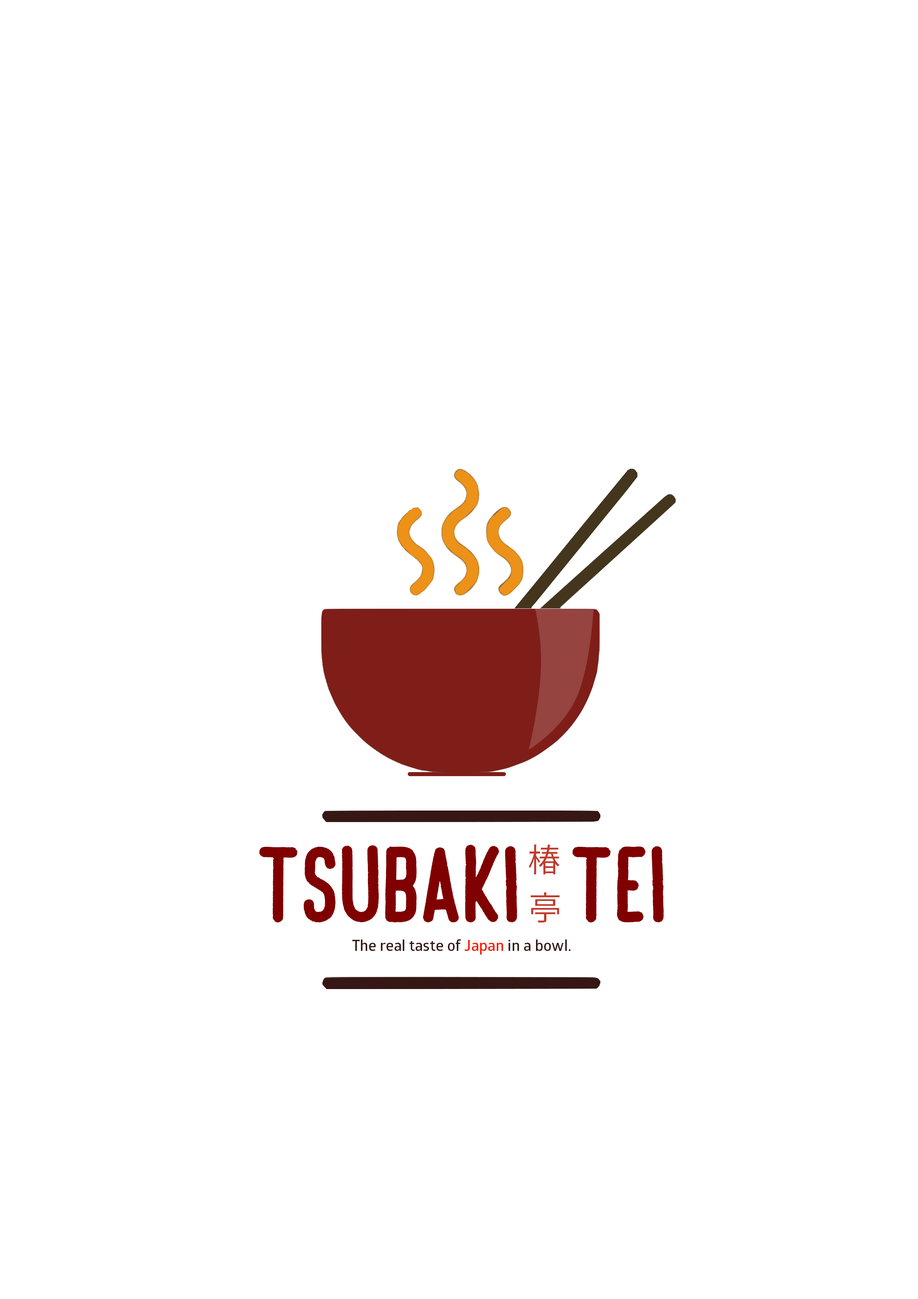
<style>
.page{position:relative;width:918px;height:1299px;background:#ffffff}
.page>*{position:absolute;margin:0}
.t1{font:84.8px "CafeFrancoise";color:#800000}
.t2{font:32.4px "KozGoPr6N-Regular";color:#c13a2b}
.t3{font:15.4px "GloberSemiBoldFree";color:#361714}
.t4{font:15.4px "GloberSemiBoldFree";color:#ff1700}
</style>
<div class="page">
<p class="t1" style="left:259px;top:844px;width:405px;height:78px">tsubaki   tei</p>
<p class="t2" style="left:529px;top:844px;width:31px;height:30px">椿</p>
<p class="t2" style="left:531px;top:892px;width:29px;height:31px">亭</p>
<p class="t3" style="left:352px;top:939px;width:219px;height:15px">The real taste of <span class="t4">Japan </span>in a bowl.</p>
</div>
